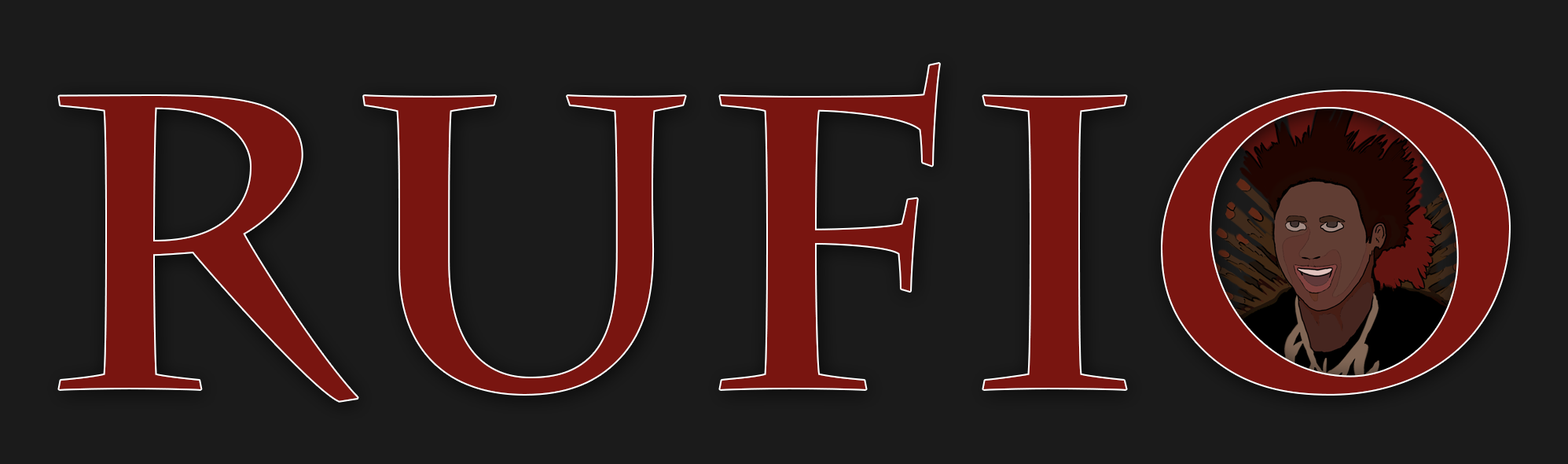
<style>
.page{position:relative;width:1568px;height:464px;background:#1b1b1b}
.page>*{position:absolute;margin:0}
.t1{font:414.2px "CharlemagneStd-Bold";color:#791510}
</style>
<div class="page">
<p class="t1" style="left:59px;top:63px;width:1450px;height:338px">Rufio</p>
</div>
